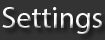
<style>
.page{position:relative;width:105px;height:40px;background:#333333}
.page>*{position:absolute;margin:0}
.t1{font:30px "MyriadPro-Regular";color:#ffffff}
</style>
<div class="page">
<p class="t1" style="left:2px;top:7px;width:100px;height:27px">Settings</p>
</div>
